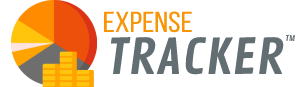
<style>
.page{position:relative;width:300px;height:87px;background:#ffffff}
.page>*{position:absolute;margin:0}
.t1{font:29px "BebasNeueRegular";color:#f89406;scale:1.16 1}
.t2{font:48.2px "ContrailOne-Regular";color:#636e72;scale:1.15 1}
.t3{font:8px "ContrailOne-Regular";color:#636e72;scale:1.15 1}
</style>
<div class="page">
<p class="t1" style="left:104px;top:11px;width:88px;height:22px">Expense</p>
<p class="t2" style="left:110px;top:37px;width:174px;height:38px">TRACKER</p>
<p class="t3" style="left:286px;top:34px;width:9px;height:7px">TM</p>
</div>
